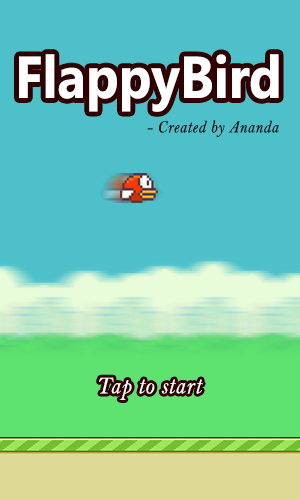
<style>
.page{position:relative;width:300px;height:500px;background:#4ec0ca}
.page>*{position:absolute;margin:0}
.t1{font:58.7px "NirmalaUI-Bold";color:#ffffff;scale:0.9 1}
.t2{font:17.6px "BellMTItalic";letter-spacing:0.03em;color:#000000;scale:0.9 1}
.t3{font:24.5px "BellMTItalic";letter-spacing:0.03em;color:#ffffff;scale:0.9 1}
</style>
<div class="page">
<p class="t1" style="left:19px;top:54px;width:260px;height:58px">FlappyBird</p>
<p class="t2" style="left:147px;top:120px;width:132px;height:18px">- Created by Ananda</p>
<p class="t3" style="left:99px;top:377px;width:104px;height:23px">Tap to start</p>
</div>
